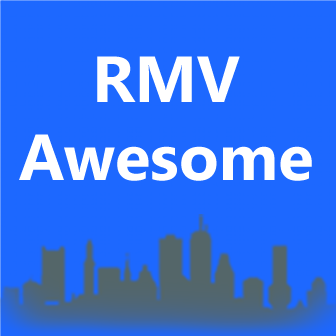
<style>
.page{position:relative;width:336px;height:336px;background:#1d68ff}
.page>*{position:absolute;margin:0}
.t1{font:65px "SegoeUI-Bold";color:#fefeff}
</style>
<div class="page">
<p class="t1" style="left:19px;top:56px;width:293px;height:125px;text-align:center">RMV<br>Awesome</p>
</div>
